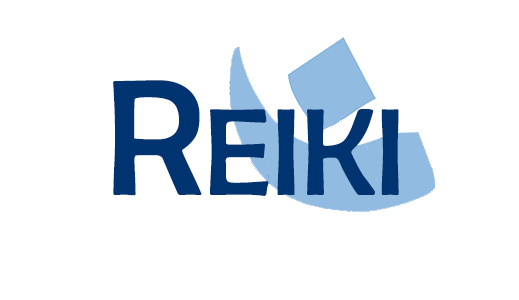
<style>
.page{position:relative;width:519px;height:300px;background:#ffffff}
.page>*{position:absolute;margin:0}
.t1{font:125px "BerlinSansFB-Reg";color:#003470}
.t2{font:166.7px "BerlinSansFB-Reg";color:#003470}
</style>
<div class="page">
<p class="t1" style="left:113px;top:80px;width:286px;height:116px"><span class="t2">R</span>EIKI</p>
</div>
